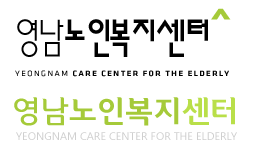
<style>
.page{position:relative;width:259px;height:155px;background:#ffffff}
.page>*{position:absolute;margin:0}
.t1{font:30px "AuctionGothicBold";letter-spacing:-0.01em;color:#a5ca39}
.t2{font:30px "AuctionGothicMedium";letter-spacing:-0.01em;color:#a5ca39}
.t3{font:30px "AuctionGothicBold";letter-spacing:-0.01em;color:#b9df49}
.t4{font:11px "SegoeUI";color:#cfcfcf}
</style>
<div class="page">
<p class="t1" style="left:14px;top:97px;width:221px;height:29px"><span class="t2">영남</span>노인복지<span class="t3">센터</span></p>
<p class="t4" style="left:16px;top:132px;width:221px;height:8px">YEONGNAM CARE CENTER FOR THE ELDERLY</p>
</div>
